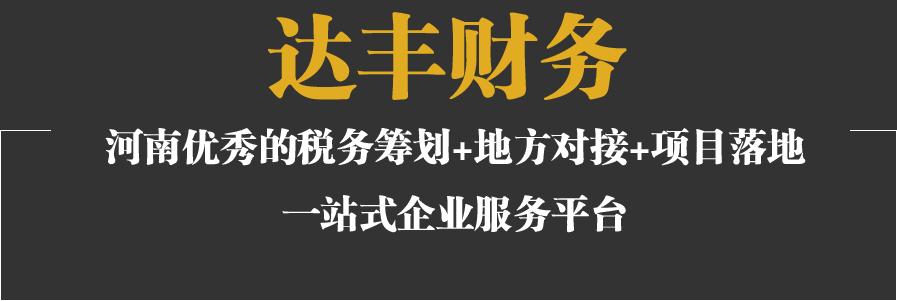
<style>
.page{position:relative;width:897px;height:301px;background:#333333}
.page>*{position:absolute;margin:0}
.t1{font:90.2px "FZCSJW--GB1-0";color:#e1ac21}
.t2{font:38px "FZCSJW--GB1-0";color:#ffffff}
</style>
<div class="page">
<p class="t1" style="left:268px;top:12px;width:359px;height:88px">达丰财务</p>
<p class="t2" style="left:105px;top:128px;width:701px;height:105px;text-align:center">河南优秀的税务筹划+地方对接+项目落地<br>一站式企业服务平台</p>
</div>
